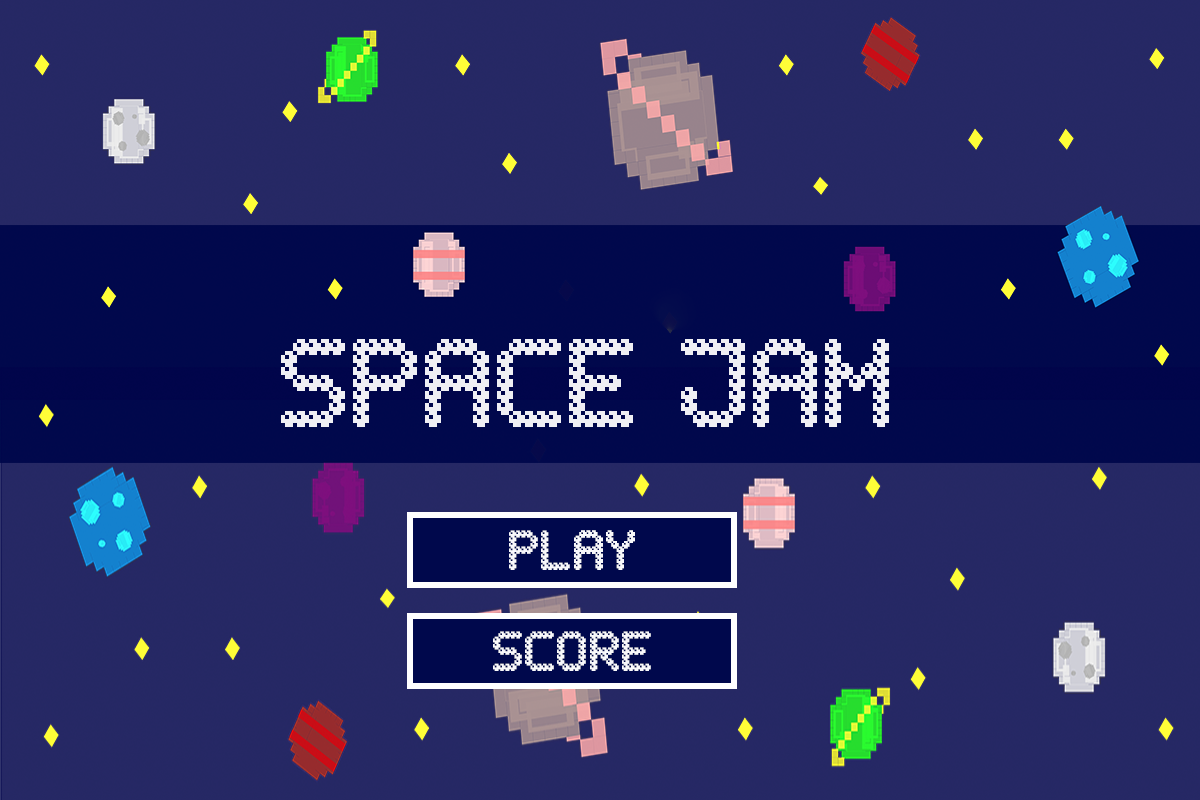
<style>
.page{position:relative;width:1200px;height:800px;background:#262865}
.page>*{position:absolute;margin:0}
.t1{font:80px "BubblePixel-7Dark";color:#efeff4}
.t2{font:36px "BubblePixel-7Dark";color:#f8f8fb}
</style>
<div class="page">
<p class="t1" style="left:281px;top:339px;width:608px;height:88px">SPACE JAM</p>
<p class="t2" style="left:509px;top:530px;width:126px;height:40px">PLay</p>
<p class="t2" style="left:493px;top:631px;width:158px;height:40px">SCORE</p>
</div>
